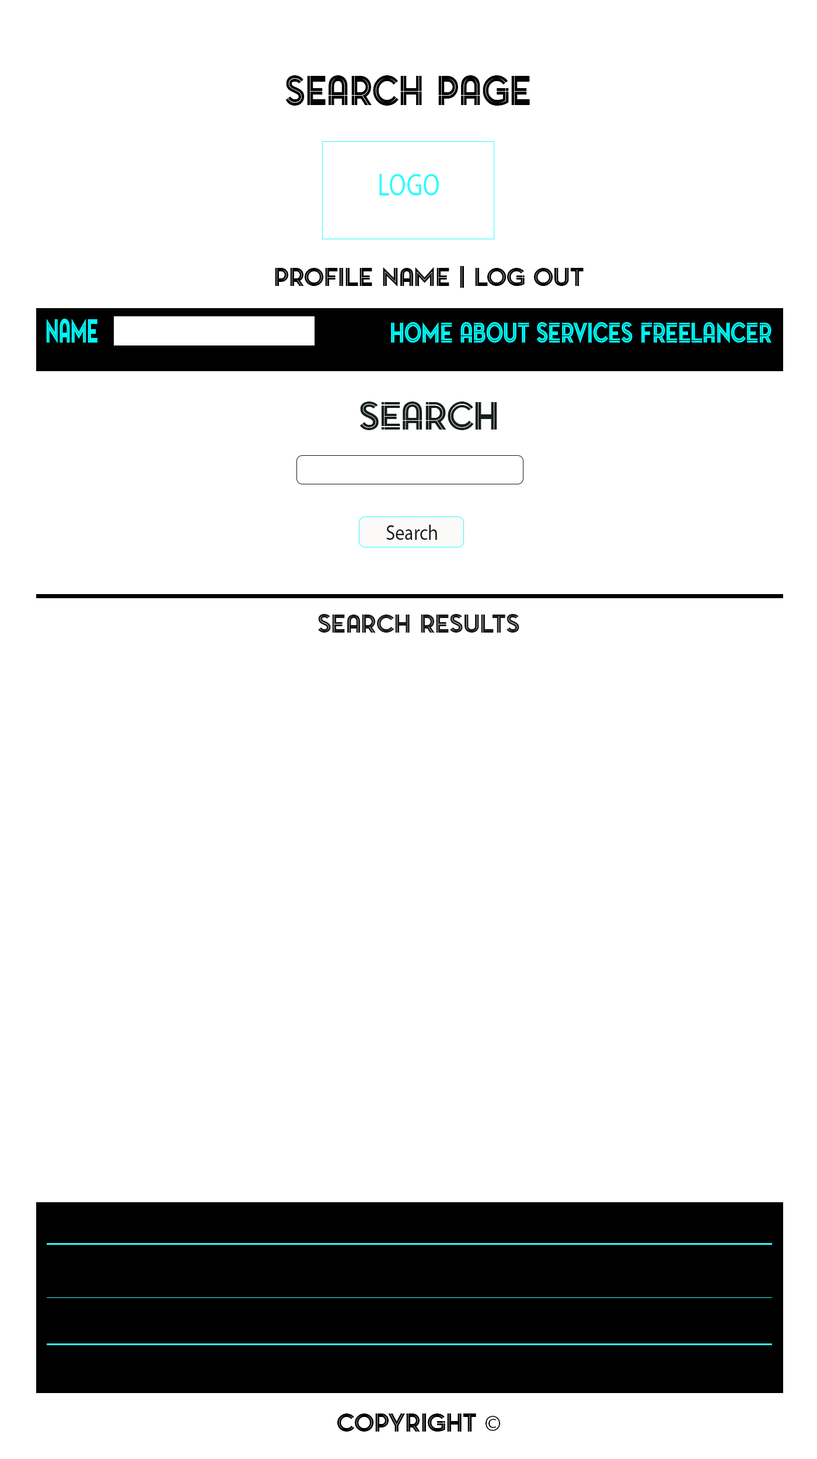
<style>
.page{position:relative;width:817px;height:1459px;background:#ffffff}
.page>*{position:absolute;margin:0}
.t1{font:39.4px "PontiacInlineRegular";color:#040404;scale:0.92 1}
.t2{font:31.6px "MyriadPro-Regular";color:#31fbfa;scale:0.8 1}
.t3{font:24.3px "PontiacInlineRegular";color:#040404}
.t4{font:30.9px "PontiacInlineRegular";color:#00ffff;scale:0.61 1}
.t5{font:26.1px "PontiacInlineRegular";color:#00ffff;scale:0.81 1}
.t6{font:36.5px "PontiacInlineRegular";color:#171e1e}
.t7{font:21.3px "MyriadPro-Regular";color:#1a1c1c;scale:0.88 1}
.t8{font:24.3px "PontiacInlineRegular";color:#1a1c1c}
.t9{font:24.3px "PontiacInlineRegular";color:#000000}
.t10{font:24.3px "MyriadPro-Regular";color:#000000}
</style>
<div class="page">
<p class="t1" style="left:285px;top:75px;width:245px;height:31px">Search Page</p>
<p class="t2" style="left:379px;top:174px;width:60px;height:22px">LOGO</p>
<p class="t3" style="left:275px;top:266px;width:309px;height:22px">Profile Name | Log Out</p>
<p class="t4" style="left:46px;top:319px;width:51px;height:24px">NAME</p>
<p class="t5" style="left:391px;top:322px;width:381px;height:21px">HOME ABOUT SERVICES FREELANCER</p>
<p class="t6" style="left:360px;top:402px;width:137px;height:28px">Search</p>
<p class="t7" style="left:386px;top:525px;width:51px;height:15px">Search</p>
<p class="t8" style="left:318px;top:614px;width:201px;height:19px">Search Results</p>
<p class="t9" style="left:337px;top:1414px;width:163px;height:18px">COPYRIGHT <span class="t10">©</span></p>
</div>
